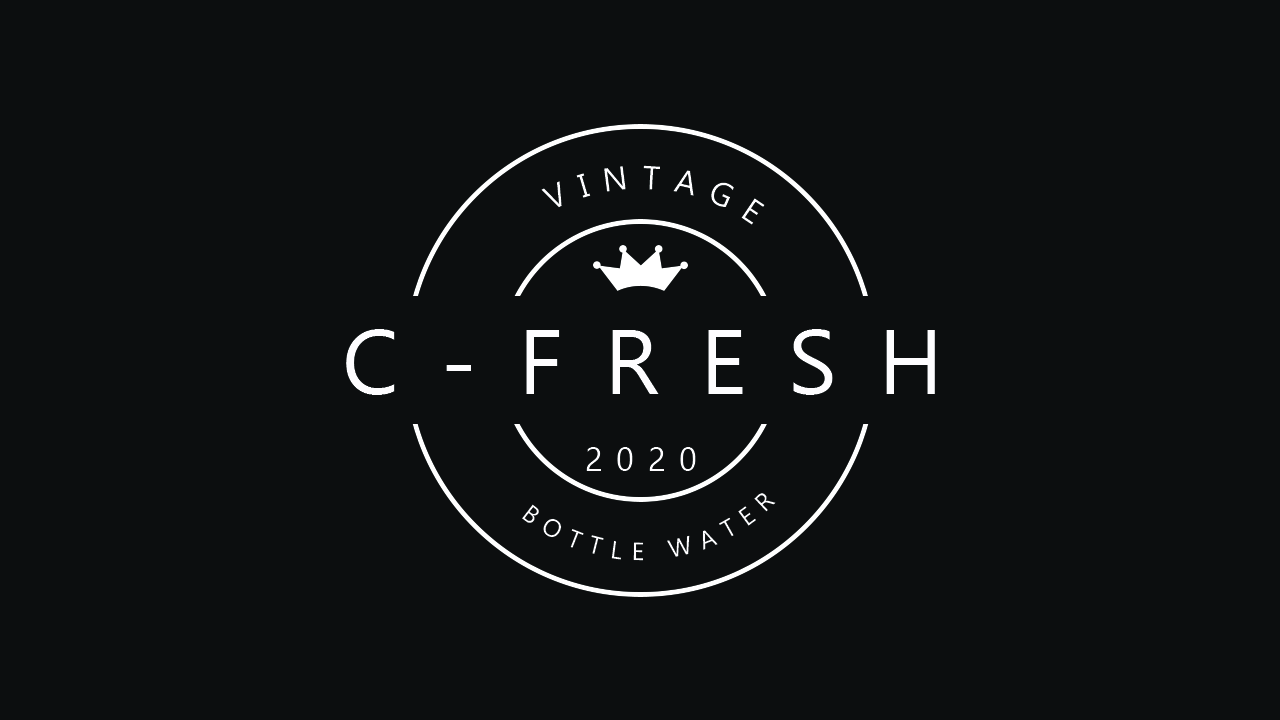
<style>
.page{position:relative;width:1280px;height:720px;background:#0c0e0f}
.page>*{position:absolute;margin:0}
.t1{font:33.3px "Gadugi";letter-spacing:0.4em;color:#fefdff}
.t2{font:91.7px "Gadugi";letter-spacing:0.45em;color:#fefdff}
.t3{font:25px "Gadugi";letter-spacing:0.4em;color:#fefdff}
</style>
<div class="page">
<p class="t1" style="left:541px;top:165px;width:224px;height:60px">VINTAGE</p>
<p class="t2" style="left:346px;top:329px;width:589px;height:66px">C-FRESH</p>
<p class="t1" style="left:586px;top:447px;width:110px;height:24px">2020</p>
<p class="t3" style="left:522px;top:493px;width:254px;height:68px">BOTTLE WATER</p>
</div>
